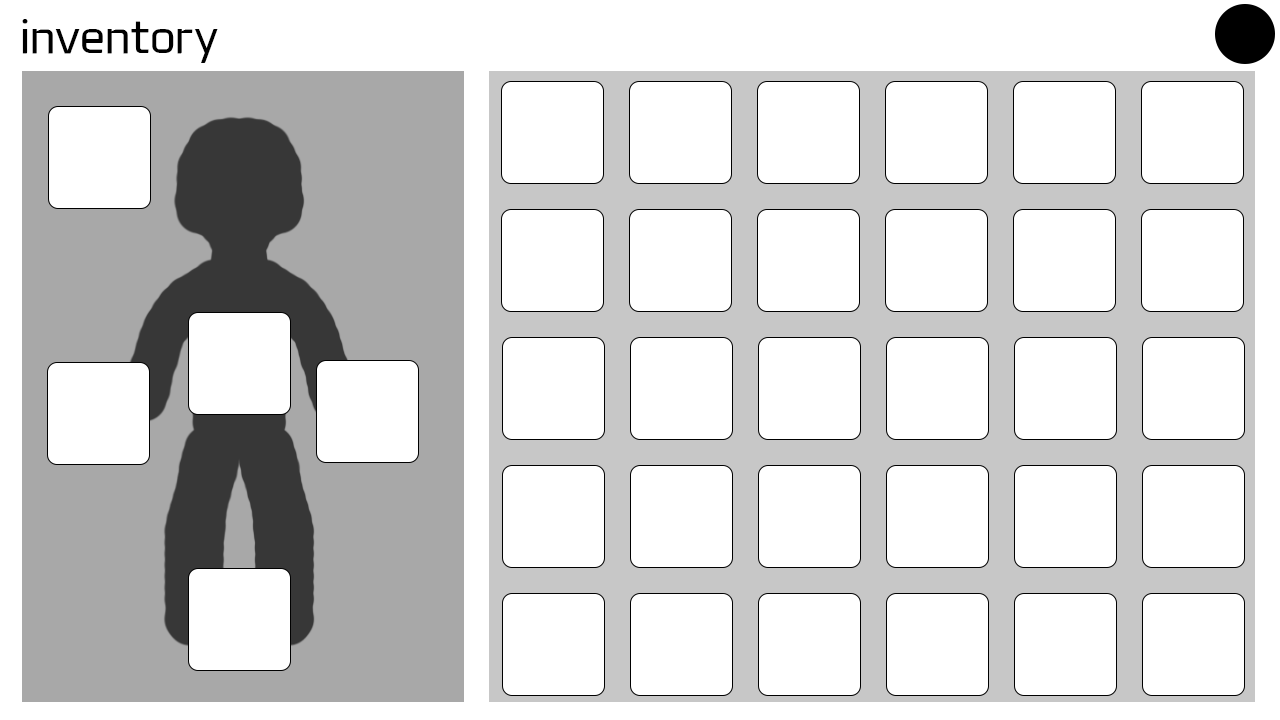
<style>
.page{position:relative;width:1280px;height:720px;background:#ffffff}
.page>*{position:absolute;margin:0}
.t1{font:42.9px "wamakeprice-regular";color:#000000}
</style>
<div class="page">
<p class="t1" style="left:22px;top:19px;width:196px;height:44px">inventory</p>
</div>
